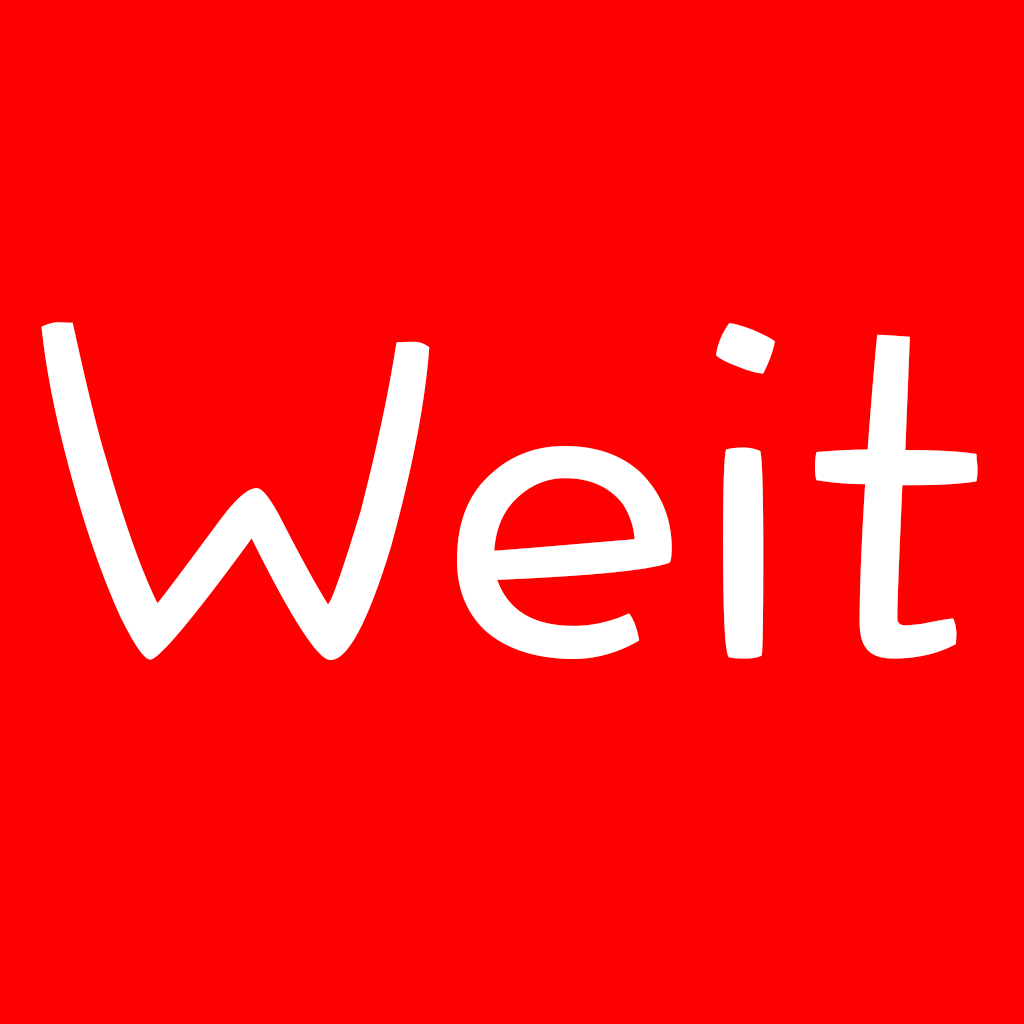
<style>
.page{position:relative;width:1024px;height:1024px;background:#ff0000}
.page>*{position:absolute;margin:0}
.t1{font:501px "DFWaWaSC-W5";color:#ffffff}
</style>
<div class="page">
<p class="t1" style="left:41px;top:322px;width:937px;height:339px">Weit</p>
</div>
